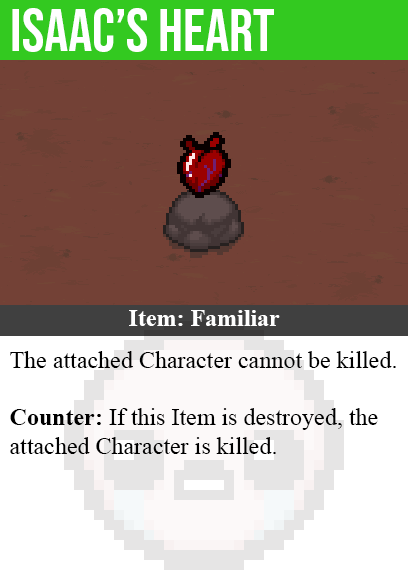
<style>
.page{position:relative;width:408px;height:585px;background:#734136}
.page>*{position:absolute;margin:0}
.t1{font:60px "BebasNeue-Regular";color:#ffffff}
.t2{font:24px "TimesNewRomanPS-BoldMT";color:#ffffff}
.t3{font:24px "TimesNewRomanPSMT";color:#000000}
.t4{font:24px "TimesNewRomanPS-BoldMT";color:#000000}
</style>
<div class="page">
<p class="t1" style="left:12px;top:8px;width:262px;height:44px">isaac’s heart</p>
<p class="t2" style="left:129px;top:310px;width:151px;height:16px">Item: Familiar</p>
<p class="t3" style="left:10px;top:351px;width:386px;height:103px">The attached Character cannot be killed.<br><br><span class="t4">Counter:</span> If this Item is destroyed, the<br>attached Character is killed.</p>
</div>
